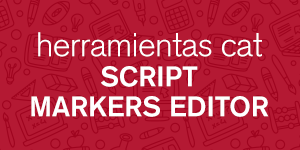
<style>
.page{position:relative;width:300px;height:150px;background:#b41933}
.page>*{position:absolute;margin:0}
.t1{font:28px/30px "AkzidenzGroteskBQ-Medium";color:#ffffff}
.t2{font:34px/35px "AkzidenzGroteskBQ-Light";letter-spacing:-0.02em;color:#ffffff}
</style>
<div class="page">
<p class="t1" style="left:31px;top:32px;width:238px;height:85px;text-align:center"><span class="t2">herramientas cat<br></span>SCRIPT<br>MARKERS EDITOR</p>
</div>
